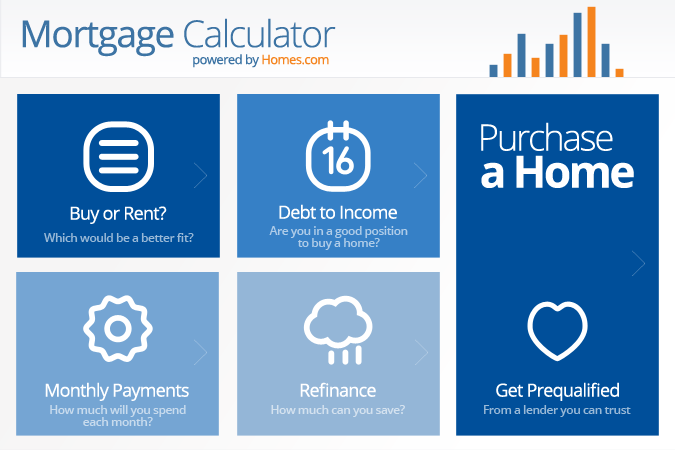
<style>
.page{position:relative;width:675px;height:450px;background:#004f9a}
.page>*{position:absolute;margin:0}
.t1{font:37.1px "OpenSans-Light";letter-spacing:-0.04em;color:#3d74a4}
.t2{font:37.1px "OpenSans";letter-spacing:-0.04em;color:#3d74a4}
.t3{font:12.9px "OpenSans";letter-spacing:-0.04em;color:#3d74a4}
.t4{font:12.9px "OpenSans";letter-spacing:-0.04em;color:#f5841e}
.t5{font:36.5px "OpenSans-Light";letter-spacing:-0.06em;color:#ffffff}
.t6{font:44.3px "OpenSans-Bold";letter-spacing:-0.06em;color:#ffffff}
.t7{font:17.9px "OpenSans";letter-spacing:-0.04em;color:#ffffff}
.t8{font:12px "OpenSans-Semibold";letter-spacing:-0.04em;color:#99b9d7}
.t9{font:12px/12px "OpenSans-Semibold";letter-spacing:-0.04em;color:#afcce8}
.t10{font:12px/12px "OpenSans-Semibold";letter-spacing:-0.04em;color:#c8dbed}
.t11{font:12px "OpenSans-Semibold";letter-spacing:-0.04em;color:#d4e2ef}
</style>
<div class="page">
<p class="t1" style="left:22px;top:18px;width:314px;height:39px"><span class="t2">Mortgage</span> Calculator</p>
<p class="t3" style="left:193px;top:54px;width:136px;height:14px">powered by <span class="t4">Homes.com</span></p>
<p class="t5" style="left:481px;top:122px;width:132px;height:29px">Purchase</p>
<p class="t6" style="left:481px;top:155px;width:153px;height:33px">a Home</p>
<p class="t7" style="left:70px;top:206px;width:97px;height:18px">Buy or Rent?</p>
<p class="t7" style="left:279px;top:204px;width:118px;height:15px">Debt to Income</p>
<p class="t8" style="left:44px;top:233px;width:150px;height:9px">Which would be a better fit?</p>
<p class="t9" style="left:269px;top:226px;width:139px;height:24px;text-align:center">Are you in a good position<br>to buy a home?</p>
<p class="t7" style="left:45px;top:382px;width:144px;height:19px">Monthly Payments</p>
<p class="t7" style="left:300px;top:382px;width:76px;height:15px">Refinance</p>
<p class="t7" style="left:496px;top:382px;width:123px;height:19px">Get Prequalified</p>
<p class="t10" style="left:50px;top:405px;width:136px;height:21px;text-align:center">How much will you spend<br>each month?</p>
<p class="t11" style="left:271px;top:405px;width:134px;height:12px">How much can you save?</p>
<p class="t8" style="left:484px;top:405px;width:147px;height:12px">From a lender you can trust</p>
</div>
